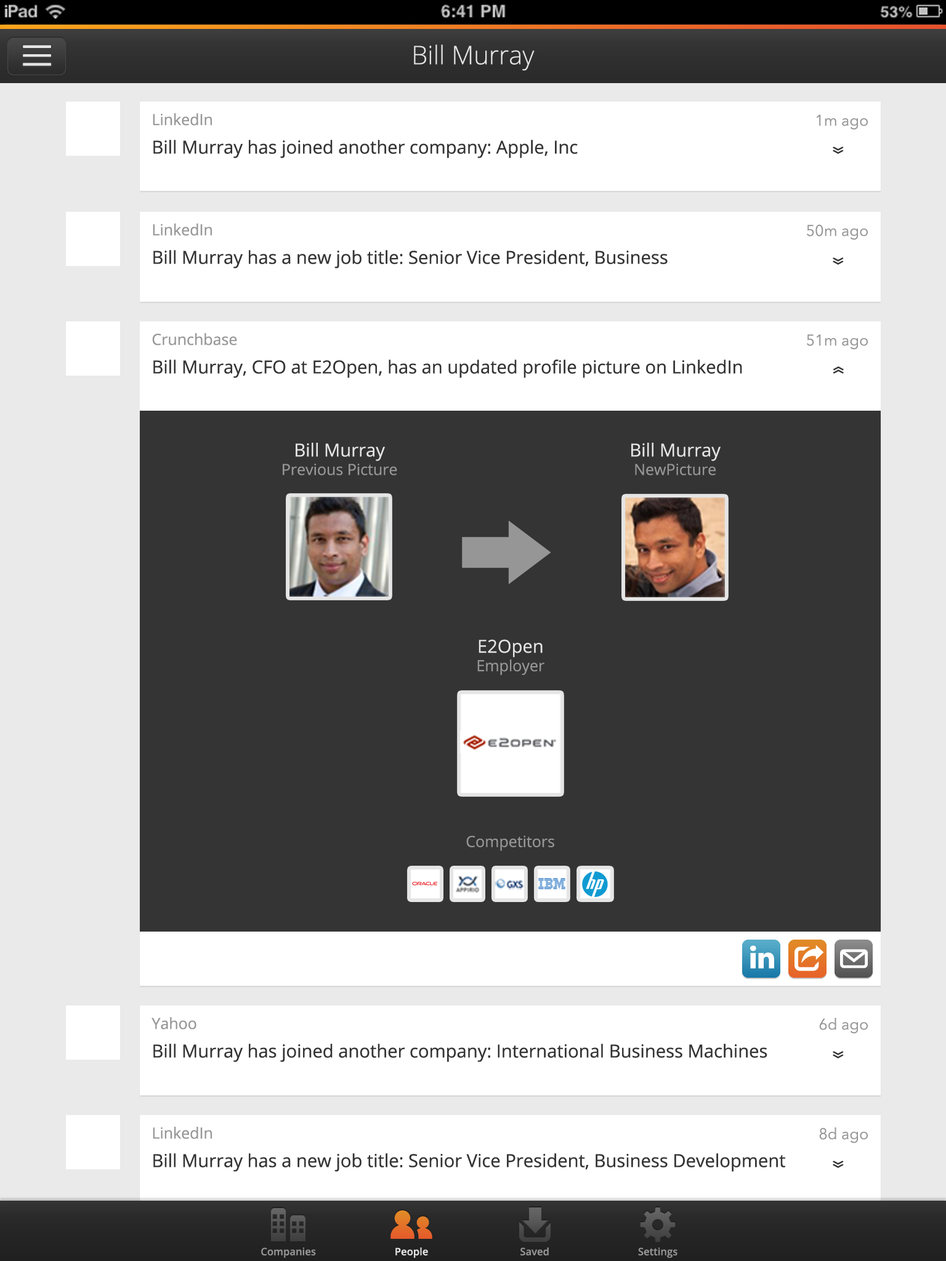
<style>
.page{position:relative;width:946px;height:1261px;background:#ffffff}
.page>*{position:absolute;margin:0}
.t1{font:25.7px "OpenSans-Light";color:#e5e5e5}
.t2{font:18px "OpenSans";color:#343434}
.t3{font:15.4px "OpenSans";color:#969696}
.t4{font:15.4px "AvenirNext-Regular";color:#969696}
.t5{font:25.7px "OpenSans";color:#343434;scale:0.64 1}
.t6{font:18px "OpenSans";color:#e5e5e5}
.t7{font:10.3px "OpenSans-Semibold";color:#969696}
.t8{font:10.3px "OpenSans-Semibold";color:#e5e5e5}
</style>
<div class="page">
<p class="t1" style="left:414px;top:44px;width:120px;height:27px">Bill Murray</p>
<p class="t2" style="left:153px;top:113px;width:425px;height:45px"><span class="t3">LinkedIn<br></span>Bill Murray has joined another company: Apple, Inc</p>
<p class="t4" style="left:816px;top:115px;width:51px;height:15px">1m ago</p>
<p class="t5" style="left:832px;top:147px;width:11px;height:7px;rotate:90deg">»</p>
<p class="t2" style="left:153px;top:223px;width:514px;height:45px"><span class="t3">LinkedIn<br></span>Bill Murray has a new job title: Senior Vice President, Business Development</p>
<p class="t4" style="left:807px;top:224px;width:60px;height:16px">50m ago</p>
<p class="t5" style="left:832px;top:257px;width:11px;height:8px;rotate:90deg">»</p>
<p class="t2" style="left:152px;top:333px;width:590px;height:45px"><span class="t3">Crunchbase<br></span>Bill Murray, CFO at E2Open, has an updated profile picture on LinkedIn</p>
<p class="t4" style="left:807px;top:334px;width:60px;height:16px">51m ago</p>
<p class="t5" style="left:832px;top:366px;width:11px;height:8px;rotate:-90deg">»</p>
<p class="t3" style="left:283px;top:443px;width:114px;height:32px;text-align:center"><span class="t6">Bill Murray<br></span>Previous Picture</p>
<p class="t6" style="left:631px;top:443px;width:89px;height:32px;text-align:center">Bill Murray<br><span class="t3">NewPicture</span></p>
<p class="t3" style="left:477px;top:639px;width:67px;height:36px;text-align:center"><span class="t6">E2Open<br></span>Employer</p>
<p class="t3" style="left:466px;top:835px;width:88px;height:16px">Competitors</p>
<p class="t2" style="left:151px;top:1017px;width:616px;height:45px"><span class="t3">Yahoo<br></span>Bill Murray has joined another company: International Business Machines</p>
<p class="t4" style="left:819px;top:1018px;width:48px;height:16px">6d ago</p>
<p class="t5" style="left:832px;top:1051px;width:11px;height:7px;rotate:90deg">»</p>
<p class="t2" style="left:153px;top:1127px;width:632px;height:45px"><span class="t3">LinkedIn<br></span>Bill Murray has a new job title: Senior Vice President, Business Development</p>
<p class="t4" style="left:819px;top:1127px;width:48px;height:16px">8d ago</p>
<p class="t5" style="left:832px;top:1161px;width:11px;height:7px;rotate:90deg">»</p>
<p class="t7" style="left:261px;top:1247px;width:55px;height:11px">Companies</p>
<p class="t8" style="left:395px;top:1247px;width:33px;height:11px">People</p>
<p class="t7" style="left:520px;top:1247px;width:29px;height:8px">Saved</p>
<p class="t7" style="left:638px;top:1247px;width:39px;height:11px">Settings</p>
</div>
